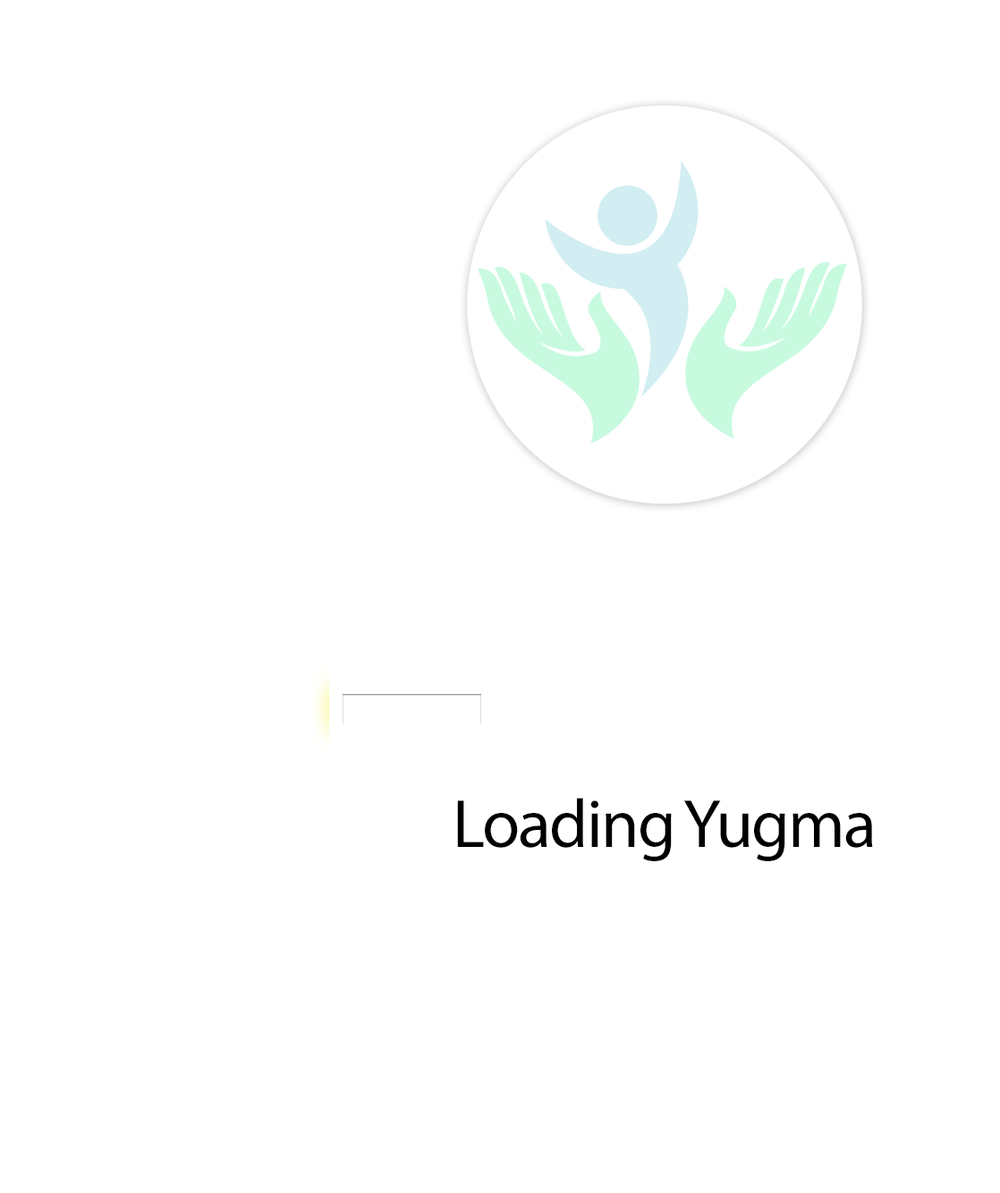
<style>
.page{position:relative;width:1000px;height:1193px;background:#ffffff}
.page>*{position:absolute;margin:0}
.t1{font:68.7px "MyriadPro-Regular";letter-spacing:-0.025em;color:#000000}
</style>
<div class="page">
<p class="t1" style="left:457px;top:798px;width:416px;height:63px">Loading Yugma</p>
</div>
